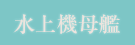
<style>
.page{position:relative;width:135px;height:45px;background:#7dc6c6}
.page>*{position:absolute;margin:0}
.t1{font:21px "RyuminPro-Medium";color:#f4e6df}
</style>
<div class="page">
<p class="t1" style="left:13px;top:14px;width:107px;height:20px">水上機母艦</p>
</div>
